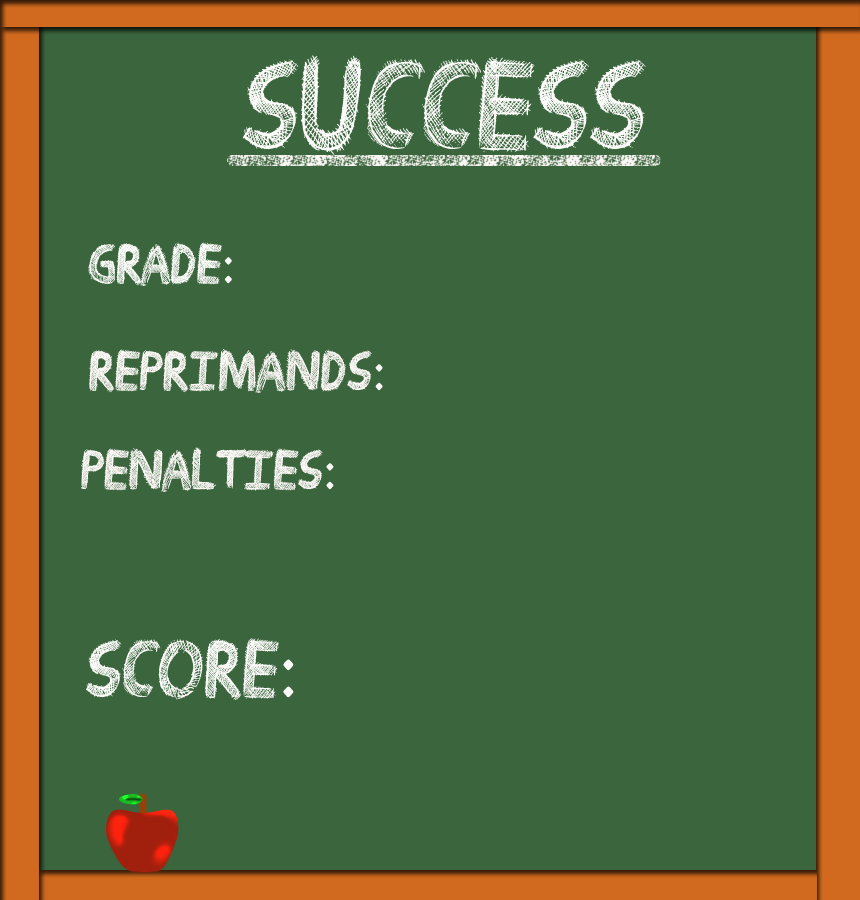
<style>
.page{position:relative;width:860px;height:900px;background:#3b653d}
.page>*{position:absolute;margin:0}
.t1{font:125px "Drawing-Guides";color:#fcfcfa}
.t2{font:55px "Drawing-Guides";color:#fcfcfa}
.t3{font:55px "Drawing-Guides";color:#faf7f5}
</style>
<div class="page">
<p class="t1" style="left:243px;top:55px;width:403px;height:101px">Success</p>
<p class="t2" style="left:88px;top:242px;width:144px;height:44px">Grade:</p>
<p class="t3" style="left:89px;top:349px;width:294px;height:44px">Reprimands:</p>
<p class="t3" style="left:81px;top:447px;width:253px;height:45px">Penalties:</p>
</div>
